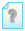
<style>
.page{position:relative;width:25px;height:31px}
.page>*{position:absolute;margin:0}
.t1{font:30px "HelveticaNeue-CondensedBlack";letter-spacing:-0.05em;color:#b1b1b1}
</style>
<div class="page">
<p class="t1" style="left:9px;top:10px;width:8px;height:13px">?</p>
</div>
